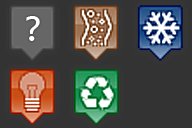
<style>
.page{position:relative;width:192px;height:128px;background:#333333}
.page>*{position:absolute;margin:0}
.t1{font:40px "EstrangeloEdessa";color:#ffffff}
</style>
<div class="page">
<p class="t1" style="left:26px;top:16px;width:14px;height:25px">?</p>
</div>
